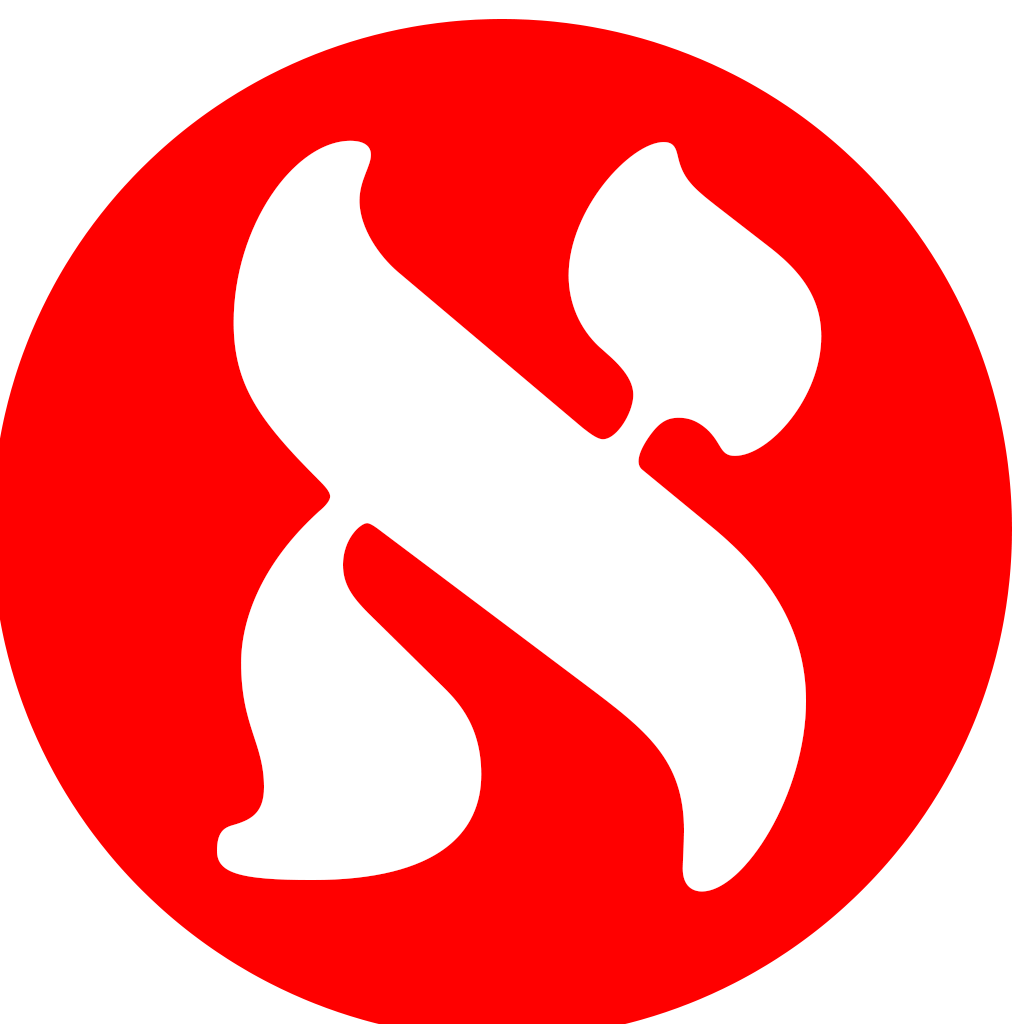
<style>
.page{position:relative;width:1024px;height:1024px;background:#ff0000}
.page>*{position:absolute;margin:0}
.t1{font:1270px "VC_Drugulin-Display";color:#ffffff}
</style>
<div class="page">
<p class="t1" style="left:217px;top:140px;width:605px;height:752px">א</p>
</div>
